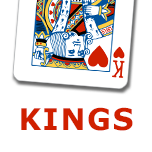
<style>
.page{position:relative;width:152px;height:152px;background:#ffffff}
.page>*{position:absolute;margin:0}
.t1{font:29.8px "Verdana-Bold";letter-spacing:0.05em;color:#d02000}
</style>
<div class="page">
<p class="t1" style="left:21px;top:107px;width:112px;height:24px">KINGS</p>
</div>
